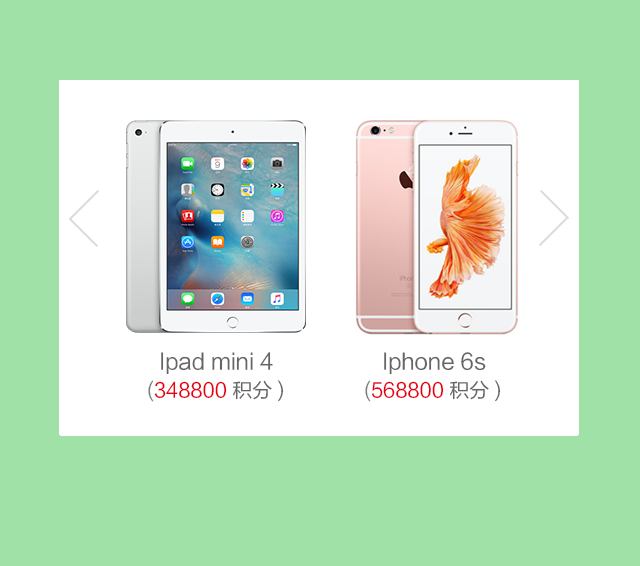
<style>
.page{position:relative;width:640px;height:566px;background:#a0e1a7}
.page>*{position:absolute;margin:0}
.t1{font:22px "FZLTHK--GBK1-0";color:#656565}
.t2{font:20px "FZLTHK--GBK1-0";color:#e60012}
.t3{font:20px "FZLTHK--GBK1-0";color:#7e7e7e}
.t4{font:20px "FZLTHK--GBK1-0";color:#656565}
</style>
<div class="page">
<p class="t1" style="left:161px;top:352px;width:112px;height:23px">Ipad mini 4</p>
<p class="t1" style="left:384px;top:352px;width:102px;height:23px">Iphone 6s</p>
<p class="t2" style="left:148px;top:380px;width:136px;height:22px"><span class="t3">(</span>113800<span class="t4"> 积分)</span></p>
<p class="t2" style="left:148px;top:380px;width:136px;height:22px"><span class="t3">(</span>348800<span class="t4"> 积分)</span></p>
<p class="t2" style="left:365px;top:380px;width:136px;height:22px"><span class="t3">(</span>568800<span class="t4"> 积分)</span></p>
</div>
